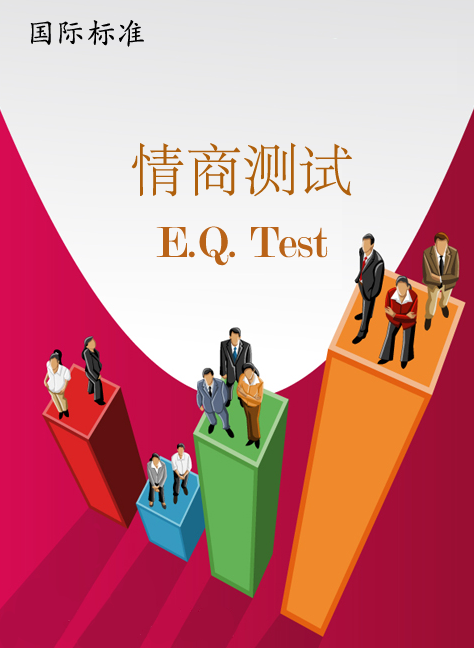
<style>
.page{position:relative;width:474px;height:648px}
.page>*{position:absolute;margin:0}
.t1{font:30px "AdobeKaitiStd-Regular";color:#000000}
.t2{font:56px "AdobeSongStd-Light";color:#af600c}
.t3{font:30px "TimesNewRomanPSMT";color:#af0c43}
.t4{font:46.1px "Modern-Regular";color:#b96318}
</style>
<div class="page">
<p class="t1" style="left:30px;top:20px;width:114px;height:27px">国际标准</p>
<p class="t2" style="left:131px;top:142px;width:221px;height:55px"><span class="t3"><br></span>情商测试</p>
<p class="t4" style="left:156px;top:226px;width:172px;height:40px">E.Q. Test</p>
</div>
